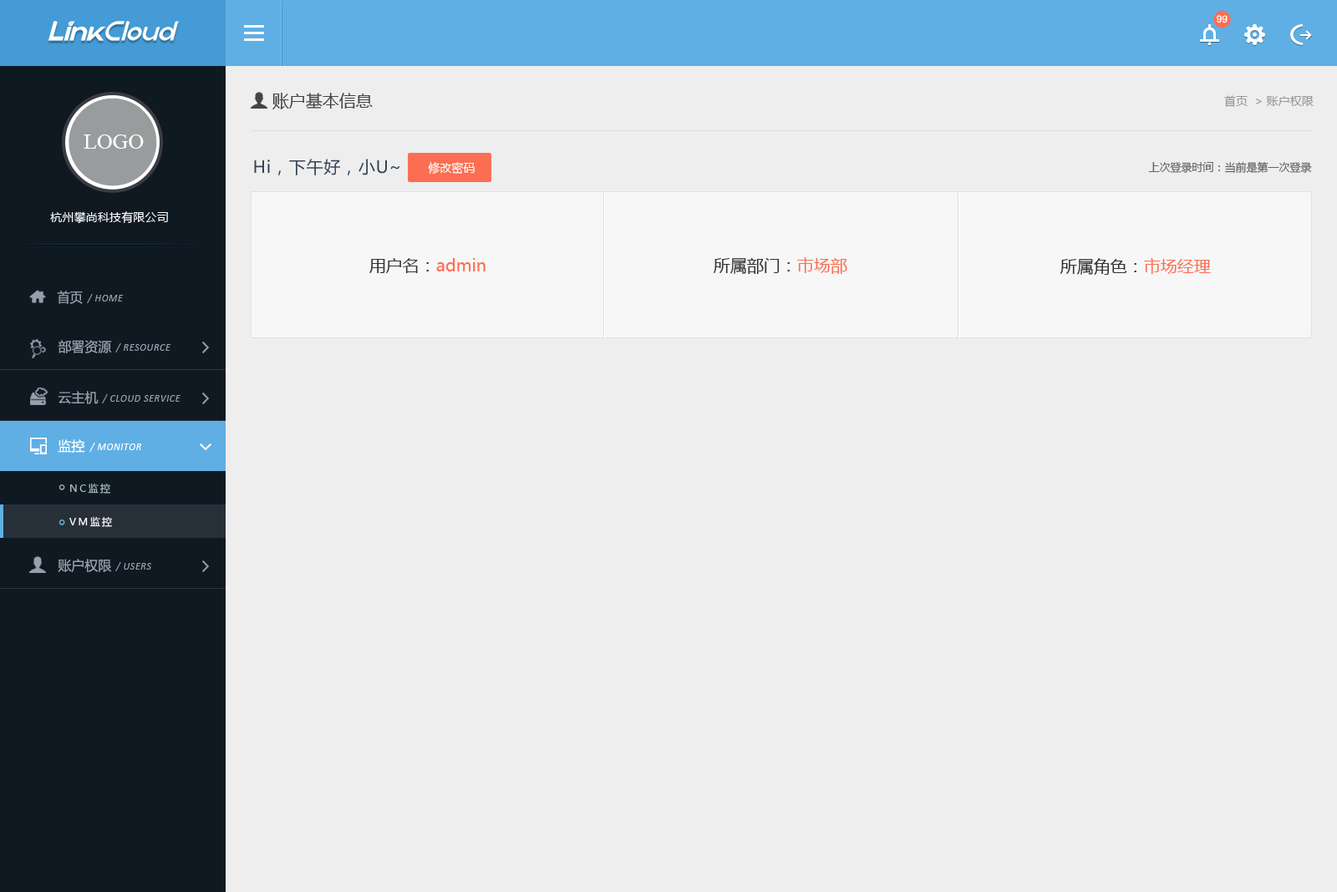
<style>
.page{position:relative;width:1337px;height:892px;background:#eeeeee}
.page>*{position:absolute;margin:0}
.t1{font:10px "ArialMT";color:#ffffff}
.t2{font:16.7px "MicrosoftYaHei";color:#444444}
.t3{font:11.7px "MicrosoftYaHei";color:#999999}
.t4{font:21.7px "TimesNewRomanPSMT";color:#ffffff}
.t5{font:16.7px "MicrosoftYaHei";letter-spacing:0.04em;color:#334353}
.t6{font:10.9px "MicrosoftYaHei";color:#666666}
.t7{font:11.7px "MicrosoftYaHei";color:#ffffff}
.t8{font:11.7px "MicrosoftYaHei";letter-spacing:0.01em;color:#ffffff}
.t9{font:16.7px "MicrosoftYaHei";color:#333333}
.t10{font:16.7px "MicrosoftYaHei";color:#fb6e52}
.t11{font:13.4px "MicrosoftYaHei";color:#95a0aa;scale:0.96 1}
.t12{font:10px "Calibri-Italic";letter-spacing:0.05em;color:#95a0aa}
.t13{font:13.4px "MicrosoftYaHei";color:#95a0aa}
.t14{font:10px "Calibri-Italic";letter-spacing:0.05em;color:#95a0aa;text-transform:uppercase}
.t15{font:13.4px "MicrosoftYaHei";color:#ffffff}
.t16{font:10px "Calibri-Italic";letter-spacing:0.05em;color:#ffffff;text-transform:uppercase}
.t17{font:10px "Calibri-Italic";letter-spacing:0.05em;color:#ffffff}
.t18{font:10px/33.4px "MicrosoftYaHei";letter-spacing:0.2em;color:#b0bdc4}
.t19{font:10px/33.4px "MicrosoftYaHei";letter-spacing:0.2em;color:#ffffff}
</style>
<div class="page">
<p class="t1" style="left:1216px;top:15px;width:11px;height:8px">99</p>
<p class="t2" style="left:272px;top:93px;width:101px;height:16px">账户基本信息</p>
<p class="t3" style="left:1224px;top:95px;width:89px;height:12px">首页  &gt; 账户权限</p>
<p class="t4" style="left:84px;top:134px;width:60px;height:15px">LOGO</p>
<p class="t5" style="left:254px;top:159px;width:145px;height:16px">Hi，下午好，小U~</p>
<p class="t6" style="left:1148px;top:161px;width:164px;height:12px">上次登录时间：当前是第一次登录</p>
<p class="t7" style="left:428px;top:162px;width:46px;height:13px">修改密码</p>
<p class="t8" style="left:50px;top:211px;width:118px;height:13px">杭州攀尚科技有限公司</p>
<p class="t9" style="left:713px;top:257px;width:134px;height:17px">所属部门：<span class="t10">市场部</span></p>
<p class="t10" style="left:369px;top:258px;width:116px;height:15px"><span class="t9">用户名：</span>admin</p>
<p class="t9" style="left:1059px;top:258px;width:151px;height:17px">所属角色：<span class="t10">市场经理</span></p>
<p class="t11" style="left:57px;top:291px;width:26px;height:13px">首页</p>
<p class="t12" style="left:87px;top:294px;width:37px;height:9px">/ HOME</p>
<p class="t13" style="left:58px;top:340px;width:54px;height:13px">部署资源</p>
<p class="t14" style="left:115px;top:343px;width:56px;height:10px"><span class="t12">/ </span>resource</p>
<p class="t13" style="left:58px;top:391px;width:41px;height:13px">云主机</p>
<p class="t14" style="left:102px;top:394px;width:78px;height:9px"><span class="t12">/ </span>cloud service</p>
<p class="t15" style="left:58px;top:439px;width:27px;height:14px">监控</p>
<p class="t16" style="left:89px;top:443px;width:53px;height:9px"><span class="t17">/ </span>monitor</p>
<p class="t18" style="left:69px;top:483px;width:43px;height:44px">NC监控<br><span class="t19">VM监控<br></span>基础资源</p>
<p class="t13" style="left:58px;top:559px;width:54px;height:13px">账户权限</p>
<p class="t14" style="left:115px;top:562px;width:36px;height:9px"><span class="t12">/ </span>users</p>
</div>
